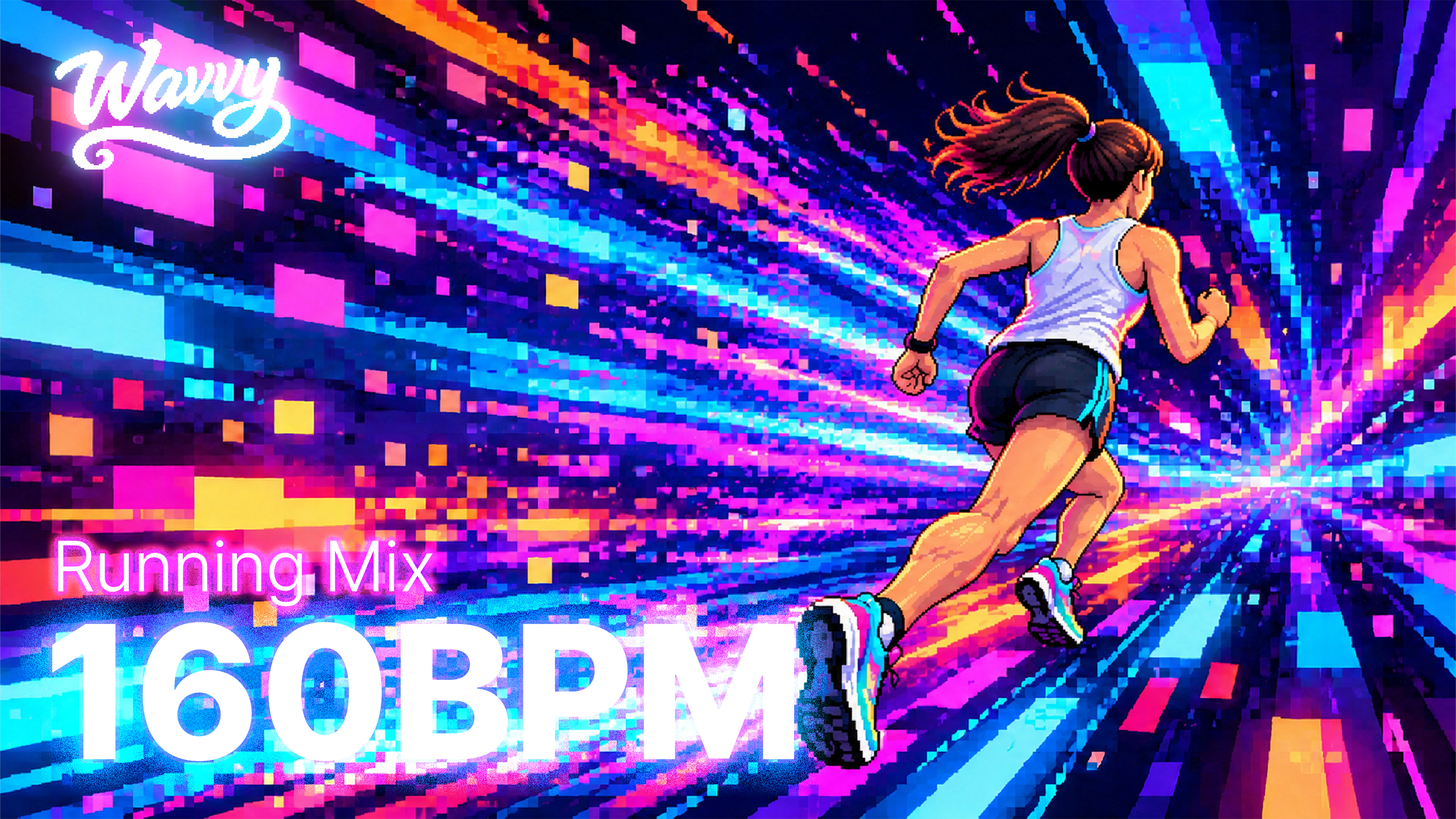
<style>
.page{position:relative;width:1456px;height:819px}
.page>*{position:absolute;margin:0}
.t1{font:71.3px "Pretendard-Light";color:#ffffff}
.t2{font:191.2px "Pretendard-ExtraBold";color:#ffffff}
</style>
<div class="page">
<p class="t1" style="left:58px;top:540px;width:375px;height:67px">Running Mix</p>
<p class="t2" style="left:52px;top:622px;width:742px;height:139px">160BPM</p>
</div>
